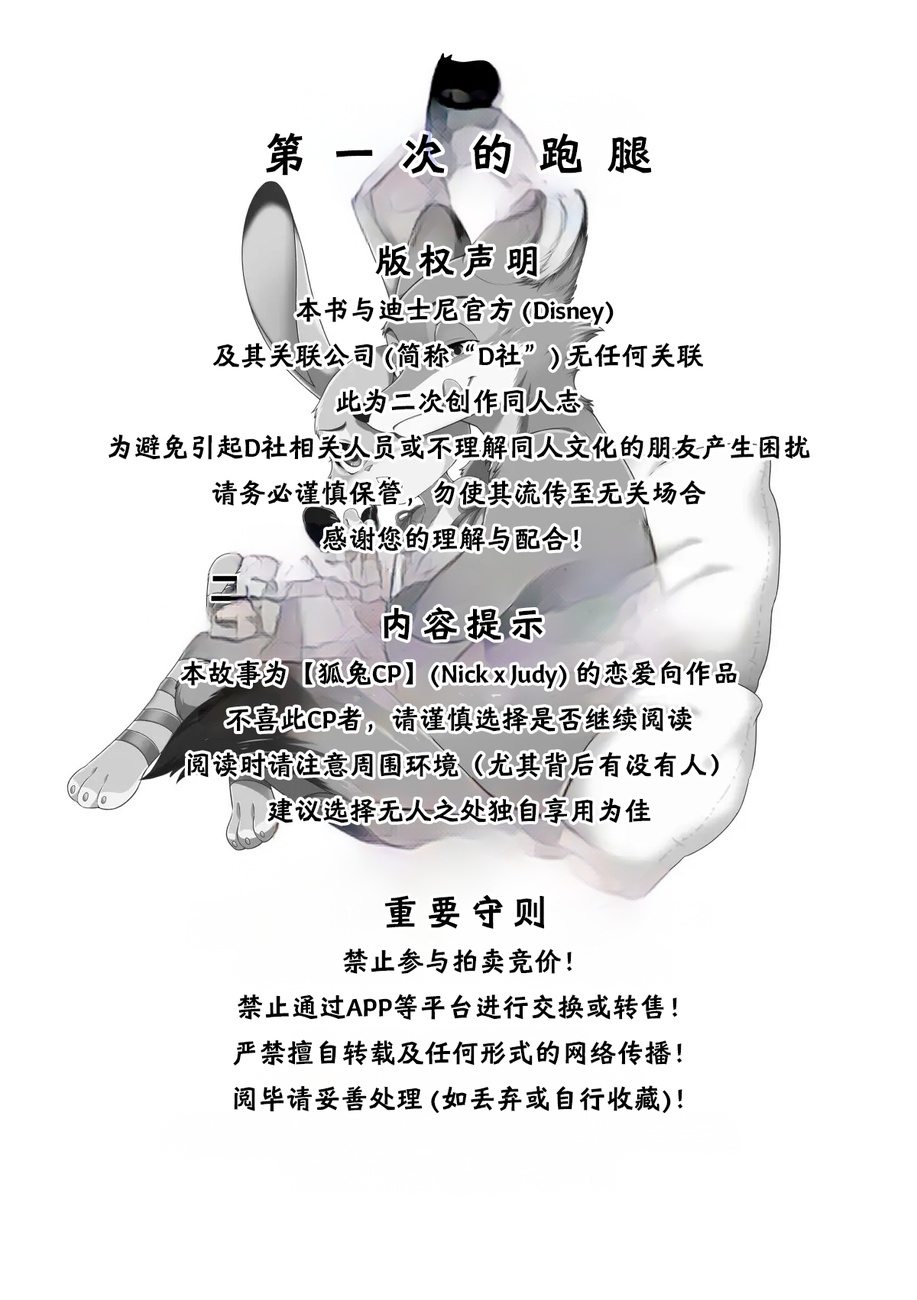
<style>
.page{position:relative;width:917px;height:1300px;background:#ffffff}
.page>*{position:absolute;margin:0}
.t1{font:45.8px "HYShiWei75U";letter-spacing:0.5em;color:#000000}
.t2{font:27.5px/45.8px "HYShiWei75U";color:#000000}
.t3{font:36.7px/45.8px "HYShiWei75U";color:#000000}
</style>
<div class="page">
<p class="t1" style="left:266px;top:132px;width:386px;height:44px">第一次的跑腿</p>
<p class="t2" style="left:109px;top:244px;width:701px;height:308px;text-align:center"><span class="t3">版 权 声 明<br></span>本书与迪士尼官方 (Disney) <br>及其关联公司 (简称“D社”) 无任何关联<br>此为二次创作同人志<br>为避免引起D社相关人员或不理解同人文化的朋友产生困扰<br>请务必谨慎保管，勿使其流传至无关场合<br>感谢您的理解与配合！</p>
<p class="t2" style="left:180px;top:607px;width:557px;height:217px;text-align:center"><span class="t3">内 容 提 示<br></span>本故事为【狐兔CP】(Nick x Judy) 的恋爱向作品<br>不喜此CP者，请谨慎选择是否继续阅读<br>阅读时请注意周围环境（尤其背后有没有人）<br>建议选择无人之处独自享用为佳</p>
<p class="t2" style="left:233px;top:895px;width:450px;height:219px;text-align:center"><span class="t3">重 要 守 则<br></span>禁止参与拍卖竞价！<br>禁止通过APP等平台进行交换或转售！<br>严禁擅自转载及任何形式的网络传播！<br>阅毕请妥善处理 (如丢弃或自行收藏)！</p>
</div>
